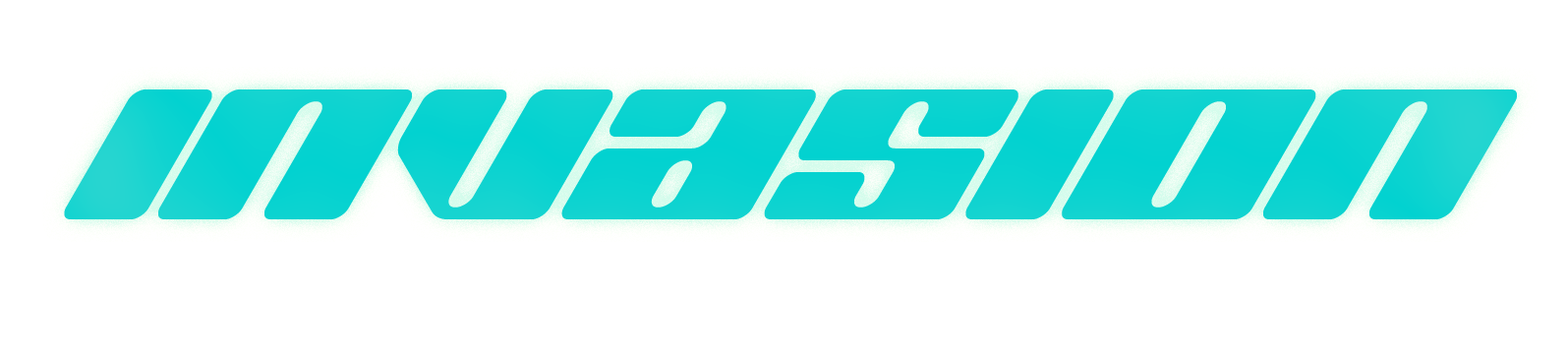
<style>
.page{position:relative;width:1568px;height:357px;background:#ffffff}
.page>*{position:absolute;margin:0}
.t1{font:245.8px "PlanetKosmos";color:#0bd3d0}
</style>
<div class="page">
<p class="t1" style="left:64px;top:89px;width:1453px;height:130px">invasion</p>
</div>
